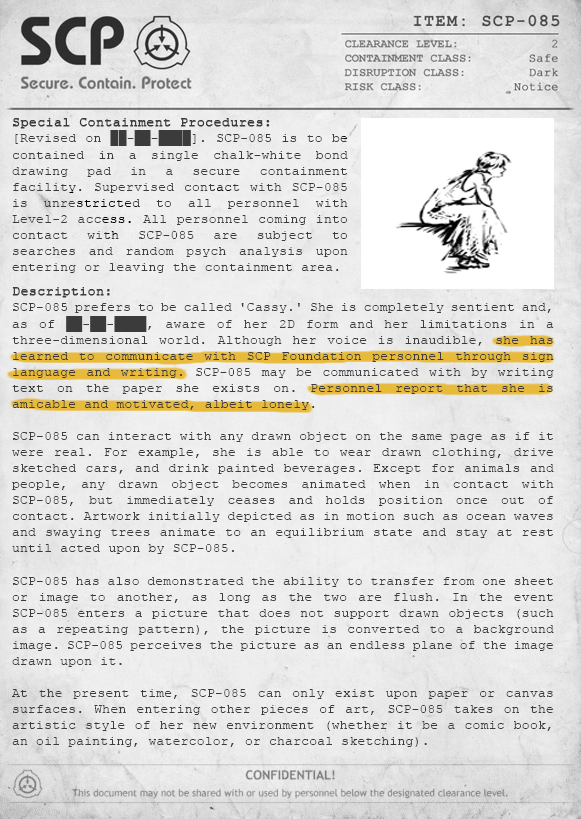
<style>
.page{position:relative;width:581px;height:819px}
.page>*{position:absolute;margin:0}
.t1{font:13.4px "CourierNewPSMT";color:#3b3b3b}
.t2{font:13.4px "CourierNewPSMT";color:#3b3b3b;font-weight:bold}
</style>
<div class="page">
<p class="t1" style="left:12px;top:118px;width:336px;height:155px;text-align:justify"><span class="t2">Special Containment Procedures: <br></span>[Revised on ██-██-████]. SCP-085 is to be contained in a single chalk-white bond drawing pad in a secure containment facility. Supervised contact with SCP-085 is unrestricted to all personnel with Level-2 access. All personnel coming into contact with SCP-085 are subject to searches and random psych analysis upon entering or leaving the containment area.</p>
<p class="t1" style="left:12px;top:287px;width:542px;height:460px;text-align:justify"><span class="t2">Description: <br></span>SCP-085 prefers to be called 'Cassy.' She is completely sentient and, as of ██-██-████, aware of her 2D form and her limitations in a three-dimensional world. Although her voice is inaudible, she has learned to communicate with SCP Foundation personnel through sign language and writing. SCP-085 may be communicated with by writing text on the paper she exists on. Personnel report that she is amicable and motivated, albeit lonely.<br><br>SCP-085 can interact with any drawn object on the same page as if it were real. For example, she is able to wear drawn clothing, drive sketched cars, and drink painted beverages. Except for animals and people, any drawn object becomes animated when in contact with SCP-085, but immediately ceases and holds position once out of contact. Artwork initially depicted as in motion such as ocean waves and swaying trees animate to an equilibrium state and stay at rest until acted upon by SCP-085.<br><br>SCP-085 has also demonstrated the ability to transfer from one sheet or image to another, as long as the two are flush. In the event SCP-085 enters a picture that does not support drawn objects (such as a repeating pattern), the picture is converted to a background image. SCP-085 perceives the picture as an endless plane of the image drawn upon it.<br><br>At the present time, SCP-085 can only exist upon paper or canvas surfaces. When entering other pieces of art, SCP-085 takes on the artistic style of her new environment (whether it be a comic book, an oil painting, watercolor, or charcoal sketching).</p>
</div>
